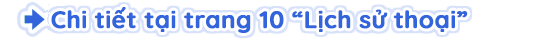
<style>
.page{position:relative;width:560px;height:41px;background:#ffffff}
.page>*{position:absolute;margin:0}
.t1{font:24px "Quicksand-Bold";color:#3264dc;font-weight:bold}
</style>
<div class="page">
<p class="t1" style="left:51px;top:7px;width:417px;height:26px">Chi tiết tại trang 10 “Lịch sử thoại”</p>
</div>
